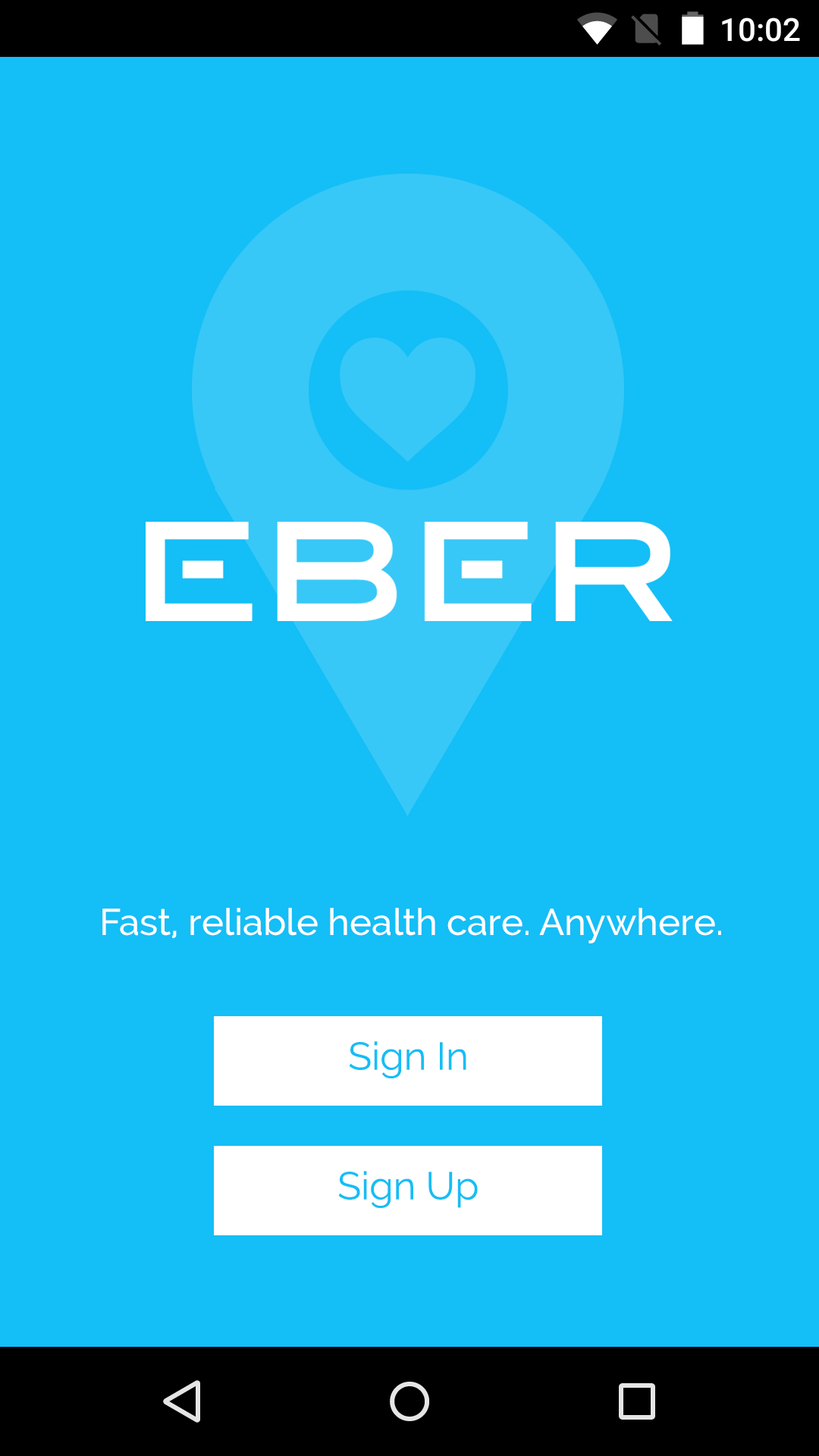
<style>
.page{position:relative;width:819px;height:1456px;background:#14bef6}
.page>*{position:absolute;margin:0}
.t1{font:37.2px "Raleway-Medium";color:#ffffff}
.t2{font:38.7px "Raleway";color:#14bef6}
</style>
<div class="page">
<p class="t1" style="left:102px;top:908px;width:619px;height:35px">Fast, reliable health care. Anywhere.</p>
<p class="t2" style="left:349px;top:1041px;width:117px;height:37px">Sign In</p>
<p class="t2" style="left:338px;top:1171px;width:140px;height:37px">Sign Up</p>
</div>
